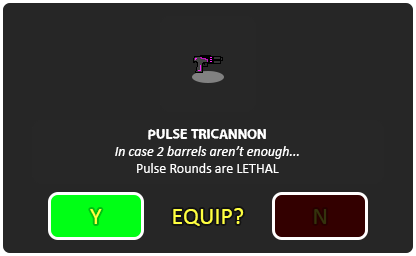
<style>
.page{position:relative;width:416px;height:256px;background:#262626}
.page>*{position:absolute;margin:0}
.t1{font:14px "Calibri-Italic";color:#ffffff}
.t2{font:14px "LooseySans";color:#ffffff}
.t3{font:14px "Calibri";color:#ffffff}
.t4{font:24px "Calibri";color:#ffff40}
.t5{font:24px "Calibri";color:#33330d}
</style>
<div class="page">
<p class="t1" style="left:115px;top:129px;width:184px;height:44px;text-align:center"><span class="t2">PULSE TRICANNON<br></span>In case 2 barrels aren’t enough...<br><span class="t3">Pulse Rounds are LETHAL</span></p>
<p class="t4" style="left:90px;top:209px;width:12px;height:15px">Y</p>
<p class="t4" style="left:173px;top:208px;width:71px;height:18px">EQUIP?</p>
<p class="t5" style="left:314px;top:209px;width:13px;height:15px">N</p>
</div>
